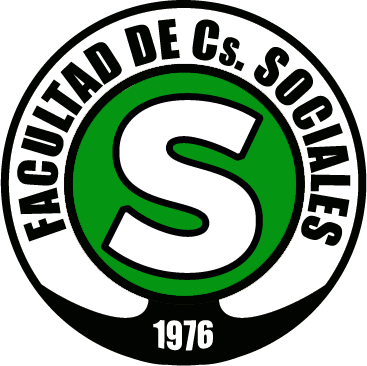
<style>
.page{position:relative;width:367px;height:366px;background:#ffffff}
.page>*{position:absolute;margin:0}
.t1{font:49.5px "Impact";color:#020400;font-variant:small-caps}
.t2{font:243px "Montserrat-Bold";letter-spacing:0.009em;color:#ffffff;font-weight:bold}
.t3{font:33px "Impact";color:#ffffff;font-variant:small-caps}
</style>
<div class="page">
<p class="t1" style="left:17px;top:18px;width:334px;height:228px;text-align:center">FACULTAD DE Cs. SOCIALES</p>
<p class="t2" style="left:104px;top:96px;width:156px;height:181px">S</p>
<p class="t3" style="left:153px;top:320px;width:60px;height:31px">1976</p>
</div>
